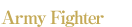
<style>
.page{position:relative;width:132px;height:27px;background:#ffffff}
.page>*{position:absolute;margin:0}
.t1{font:18px "RyuminPro-ExBold";letter-spacing:-0.08em;color:#c4a956}
</style>
<div class="page">
<p class="t1" style="left:1px;top:10px;width:103px;height:17px">Army Fighter</p>
</div>
